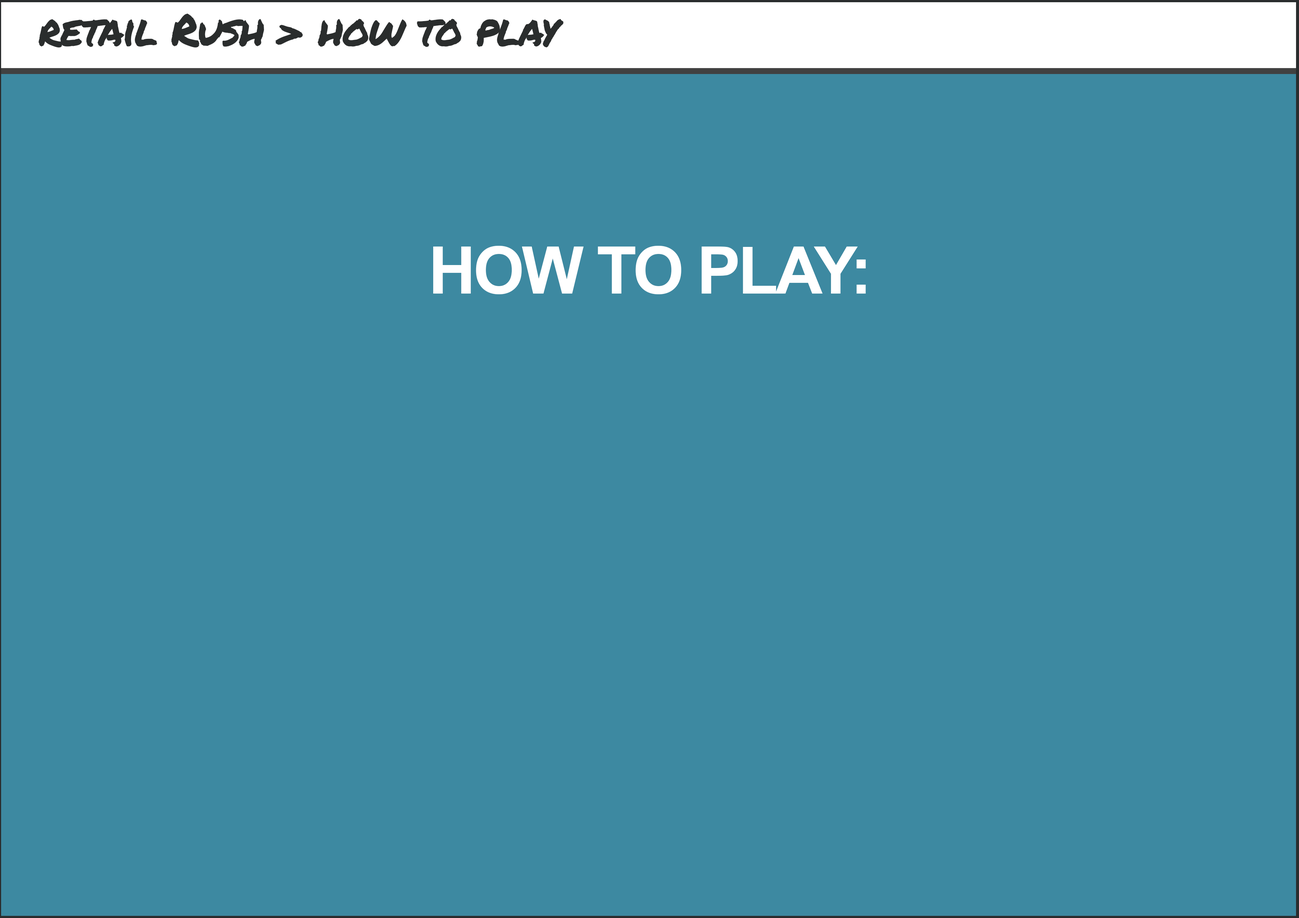
<style>
.page{position:relative;width:1299px;height:918px;background:#3d89a1}
.page>*{position:absolute;margin:0}
.t1{font:44px "PermanentMarker-Regular";letter-spacing:-0.04em;color:#2a2d2d}
.t2{font:65.6px "Arial-BoldMT";letter-spacing:-0.04em;color:#ffffff}
</style>
<div class="page">
<p class="t1" style="left:39px;top:13px;width:524px;height:35px">retail Rush &gt; how to play</p>
<p class="t2" style="left:433px;top:246px;width:433px;height:48px">HOW TO PLAY:</p>
</div>
